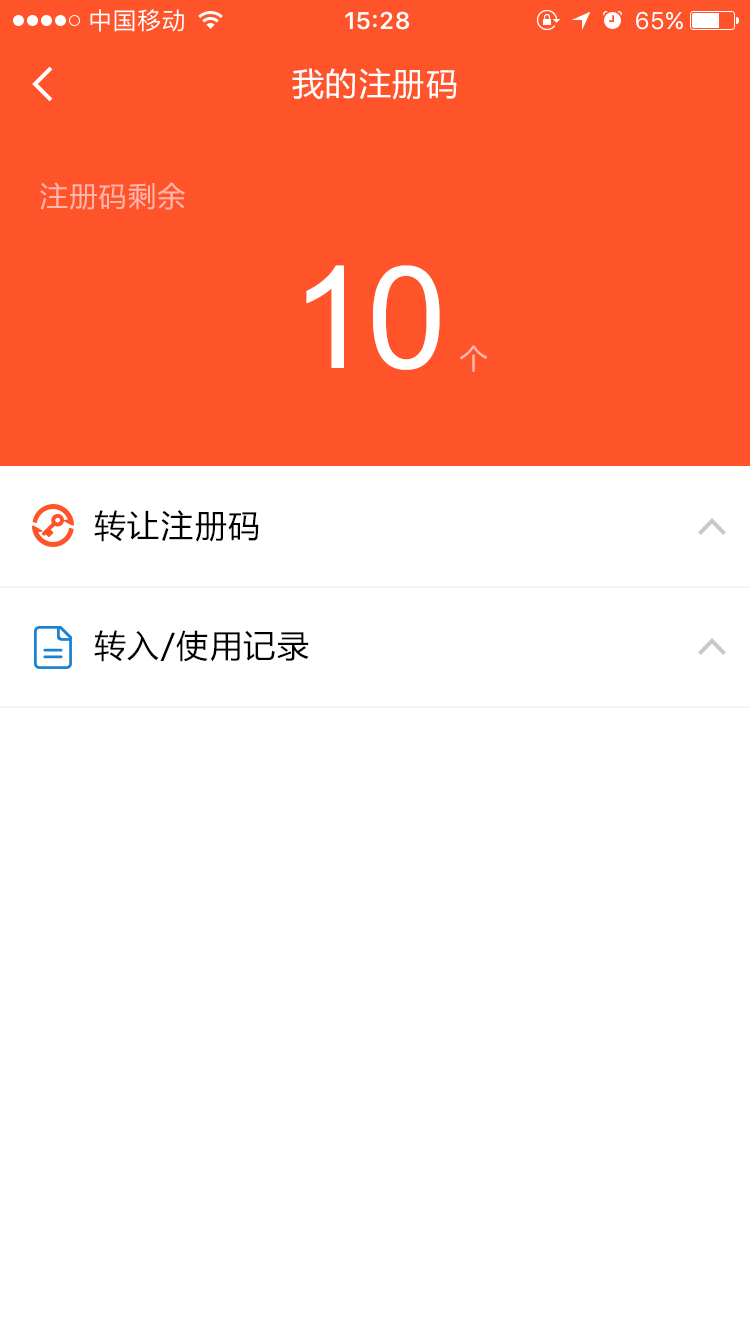
<style>
.page{position:relative;width:750px;height:1334px;background:#ffffff}
.page>*{position:absolute;margin:0}
.t1{font:32px "MicrosoftYaHei";letter-spacing:0.05em;color:#ffffff}
.t2{font:28px "MicrosoftYaHei";letter-spacing:0.05em;color:#ffb6ab}
.t3{font:142.5px "ArialMT";letter-spacing:-0.022em;color:#ffffff}
.t4{font:32px "MicrosoftYaHei";letter-spacing:0.05em;color:#000000}
</style>
<div class="page">
<p class="t1" style="left:292px;top:68px;width:165px;height:32px">我的注册码</p>
<p class="t2" style="left:40px;top:182px;width:145px;height:28px">注册码剩余</p>
<p class="t3" style="left:306px;top:265px;width:134px;height:105px">10</p>
<p class="t2" style="left:459px;top:345px;width:29px;height:27px">个</p>
<p class="t4" style="left:94px;top:510px;width:165px;height:32px">转让注册码</p>
<p class="t4" style="left:94px;top:630px;width:215px;height:32px">转入/使用记录</p>
</div>
